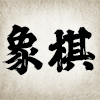
<style>
.page{position:relative;width:100px;height:100px}
.page>*{position:absolute;margin:0}
.t1{font:45.8px "HanyiSentyPagoda";color:#000000}
</style>
<div class="page">
<p class="t1" style="left:2px;top:24px;width:94px;height:52px">象棋</p>
</div>
